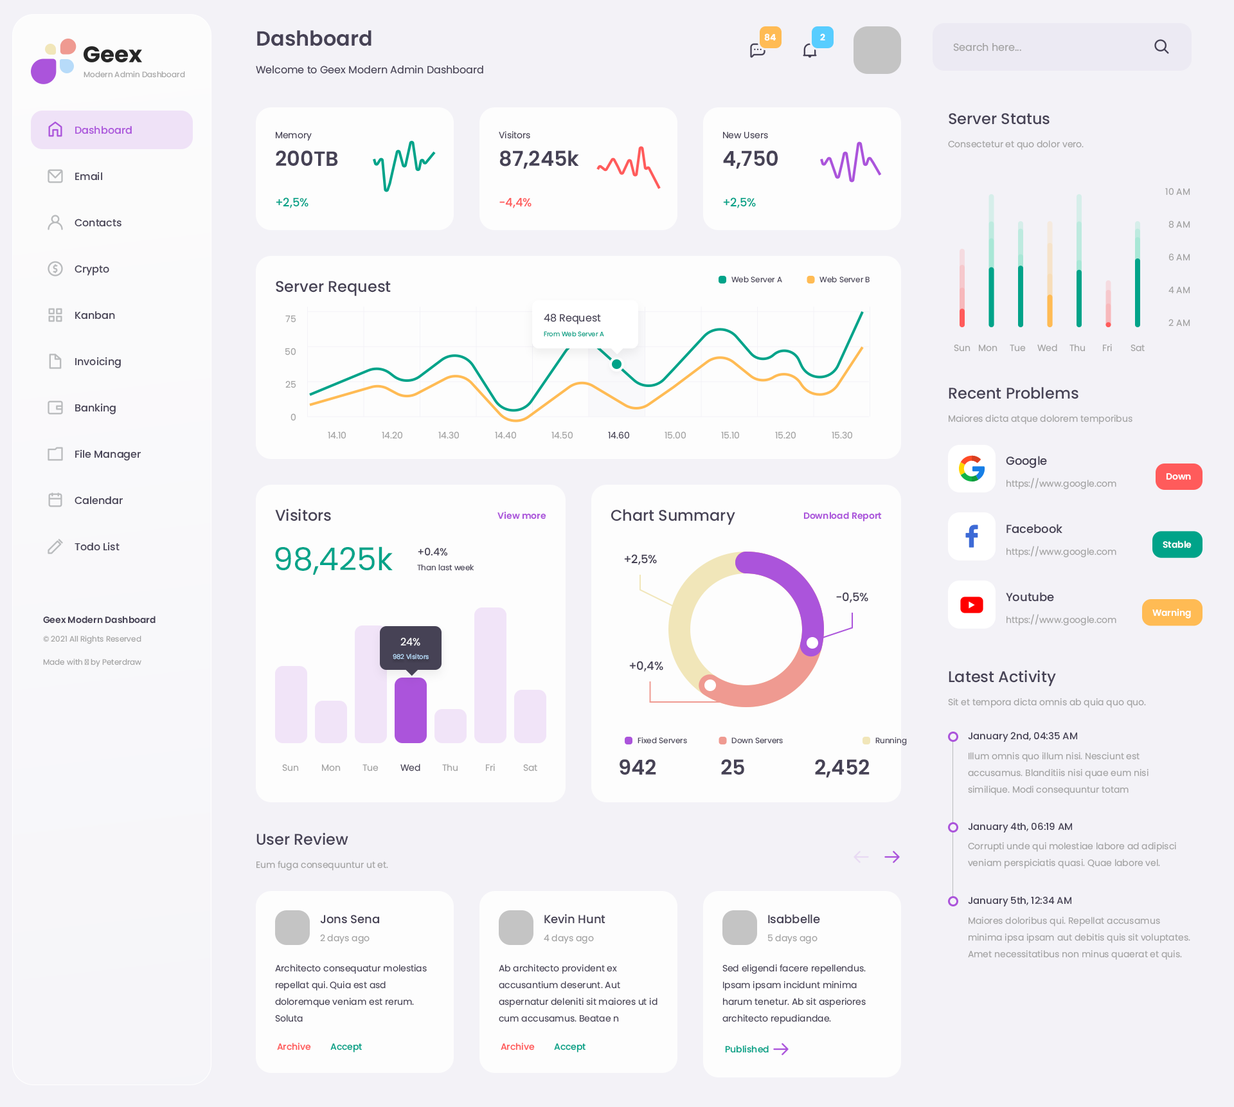
<style>
.page{position:relative;width:1234px;height:1107px;background:#f3f2f7}
.page>*{position:absolute;margin:0}
.t1{font:20.6px "Poppins-SemiBold";color:#464255}
.t2{font:9px "Poppins-Bold";color:#ffffff}
.t3{font:10.3px "Poppins-Regular";color:#a3a3a3}
.t4{font:10.3px "Poppins-Regular";color:#464255}
.t5{font:7.7px "Poppins-Regular";color:#a3a3a3}
.t6{font:15.4px "Poppins-Medium";color:#464255}
.t7{font:10.3px "Poppins-Medium";color:#ab54db}
.t8{font:9px "Poppins-Regular";color:#464255}
.t9{font:9px "Poppins-Regular";color:#a3a3a3}
.t10{font:10.3px "Poppins-Medium";color:#464255}
.t11{font:11.6px "Poppins-Medium";color:#00a389}
.t12{font:11.6px "Poppins-Medium";color:#ff5b5b}
.t13{font:7.7px "Poppins-Regular";color:#464255}
.t14{font:6.4px "Poppins-Regular";color:#00a389}
.t15{font:11.6px "Poppins-Medium";color:#464255}
.t16{font:9px "Poppins-SemiBold";color:#ffffff}
.t17{font:9px "Poppins-SemiBold";color:#ab54db}
.t18{font:31.5px "Poppins-Regular";color:#00a389}
.t19{font:9px "Poppins-SemiBold";color:#464255}
.t20{font:10.3px "Poppins-Regular";color:#ffffff}
.t21{font:6.4px "Poppins-Regular";color:#b7dbf9}
.t22{font:9.6px "Poppins-Medium";color:#464255}
.t23{font:9px/16.7px "Poppins-Regular";color:#a3a3a3}
.t24{font:9px/16.7px "Poppins-Regular";color:#464255}
.t25{font:9px "Poppins-Medium";color:#ff5b5b}
.t26{font:9px "Poppins-Medium";color:#00a389}
</style>
<div class="page">
<p class="t1" style="left:257px;top:30px;width:115px;height:16px">Dashboard</p>
<p class="t2" style="left:764px;top:33px;width:12px;height:8px">84</p>
<p class="t2" style="left:820px;top:33px;width:5px;height:7px">2</p>
<p class="t3" style="left:953px;top:43px;width:69px;height:8px">Search here...</p>
<p class="t4" style="left:256px;top:65px;width:227px;height:9px">Welcome to Geex Modern Admin Dashboard</p>
<p class="t5" style="left:84px;top:71px;width:101px;height:7px">Modern Admin Dashboard</p>
<p class="t6" style="left:949px;top:113px;width:101px;height:12px">Server Status</p>
<p class="t7" style="left:75px;top:126px;width:57px;height:8px">Dashboard</p>
<p class="t8" style="left:276px;top:132px;width:36px;height:9px">Memory</p>
<p class="t8" style="left:499px;top:131px;width:31px;height:8px">Visitors</p>
<p class="t8" style="left:723px;top:132px;width:45px;height:7px">New Users</p>
<p class="t9" style="left:948px;top:140px;width:136px;height:10px">Consectetur et quo dolor vero.</p>
<p class="t1" style="left:276px;top:150px;width:62px;height:16px">200TB</p>
<p class="t1" style="left:500px;top:150px;width:79px;height:19px">87,245k</p>
<p class="t1" style="left:723px;top:150px;width:55px;height:19px">4,750</p>
<p class="t10" style="left:75px;top:172px;width:27px;height:9px">Email</p>
<p class="t11" style="left:276px;top:197px;width:33px;height:11px">+2,5%</p>
<p class="t12" style="left:500px;top:197px;width:32px;height:11px">-4,4%</p>
<p class="t11" style="left:723px;top:197px;width:33px;height:11px">+2,5%</p>
<p class="t9" style="left:1166px;top:188px;width:25px;height:7px">10 AM</p>
<p class="t10" style="left:75px;top:219px;width:47px;height:8px">Contacts</p>
<p class="t9" style="left:1169px;top:221px;width:22px;height:7px">8 AM</p>
<p class="t9" style="left:1169px;top:253px;width:22px;height:8px">6 AM</p>
<p class="t10" style="left:75px;top:265px;width:34px;height:11px">Crypto</p>
<p class="t6" style="left:276px;top:281px;width:115px;height:15px">Server Request</p>
<p class="t13" style="left:732px;top:276px;width:50px;height:7px">Web Server A</p>
<p class="t13" style="left:820px;top:276px;width:50px;height:7px">Web Server B</p>
<p class="t9" style="left:1169px;top:286px;width:22px;height:8px">4 AM</p>
<p class="t10" style="left:75px;top:311px;width:40px;height:9px">Kanban</p>
<p class="t9" style="left:285px;top:315px;width:11px;height:8px">75</p>
<p class="t4" style="left:544px;top:314px;width:57px;height:11px">48 Request</p>
<p class="t9" style="left:1169px;top:319px;width:22px;height:8px">2 AM</p>
<p class="t14" style="left:544px;top:331px;width:60px;height:6px">From Web Server A</p>
<p class="t9" style="left:285px;top:348px;width:11px;height:8px">50</p>
<p class="t9" style="left:954px;top:345px;width:17px;height:7px">Sun</p>
<p class="t9" style="left:979px;top:345px;width:19px;height:7px">Mon</p>
<p class="t9" style="left:1010px;top:345px;width:16px;height:7px">Tue</p>
<p class="t9" style="left:1038px;top:344px;width:20px;height:8px">Wed</p>
<p class="t9" style="left:1070px;top:344px;width:15px;height:8px">Thu</p>
<p class="t9" style="left:1103px;top:344px;width:9px;height:8px">Fri</p>
<p class="t9" style="left:1131px;top:345px;width:14px;height:7px">Sat</p>
<p class="t10" style="left:75px;top:357px;width:46px;height:11px">Invoicing</p>
<p class="t9" style="left:285px;top:381px;width:11px;height:7px">25</p>
<p class="t6" style="left:949px;top:387px;width:130px;height:12px">Recent Problems</p>
<p class="t10" style="left:75px;top:403px;width:41px;height:12px">Banking</p>
<p class="t9" style="left:291px;top:413px;width:5px;height:8px">0</p>
<p class="t9" style="left:949px;top:415px;width:184px;height:9px">Maiores dicta atque dolorem temporibus</p>
<p class="t9" style="left:328px;top:431px;width:18px;height:8px">14.10</p>
<p class="t9" style="left:382px;top:431px;width:20px;height:8px">14.20</p>
<p class="t9" style="left:438px;top:431px;width:21px;height:8px">14.30</p>
<p class="t9" style="left:495px;top:431px;width:21px;height:8px">14.40</p>
<p class="t9" style="left:552px;top:431px;width:21px;height:8px">14.50</p>
<p class="t8" style="left:608px;top:431px;width:21px;height:8px">14.60</p>
<p class="t9" style="left:665px;top:431px;width:21px;height:8px">15.00</p>
<p class="t9" style="left:721px;top:431px;width:18px;height:8px">15.10</p>
<p class="t9" style="left:775px;top:431px;width:21px;height:8px">15.20</p>
<p class="t9" style="left:832px;top:431px;width:20px;height:8px">15.30</p>
<p class="t10" style="left:75px;top:449px;width:66px;height:12px">File Manager</p>
<p class="t15" style="left:1006px;top:456px;width:41px;height:12px">Google</p>
<p class="t16" style="left:1166px;top:473px;width:25px;height:7px">Down</p>
<p class="t9" style="left:1007px;top:478px;width:110px;height:11px">https://www.google.com</p>
<p class="t10" style="left:75px;top:496px;width:48px;height:9px">Calendar</p>
<p class="t6" style="left:275px;top:509px;width:56px;height:12px">Visitors</p>
<p class="t6" style="left:611px;top:509px;width:124px;height:16px">Chart Summary</p>
<p class="t17" style="left:498px;top:512px;width:48px;height:7px">View more</p>
<p class="t17" style="left:804px;top:512px;width:78px;height:9px">Download Report</p>
<p class="t15" style="left:1007px;top:524px;width:56px;height:10px">Facebook</p>
<p class="t10" style="left:75px;top:542px;width:45px;height:9px">Todo List</p>
<p class="t9" style="left:1007px;top:546px;width:110px;height:11px">https://www.google.com</p>
<p class="t16" style="left:1163px;top:541px;width:29px;height:7px">Stable</p>
<p class="t18" style="left:275px;top:546px;width:118px;height:29px">98,425k</p>
<p class="t10" style="left:418px;top:548px;width:29px;height:8px">+0.4%</p>
<p class="t15" style="left:624px;top:554px;width:33px;height:11px">+2,5%</p>
<p class="t13" style="left:417px;top:564px;width:57px;height:7px">Than last week</p>
<p class="t15" style="left:836px;top:592px;width:33px;height:11px">-0,5%</p>
<p class="t15" style="left:1006px;top:592px;width:48px;height:10px">Youtube</p>
<p class="t19" style="left:43px;top:616px;width:113px;height:8px">Geex Modern Dashboard</p>
<p class="t9" style="left:1007px;top:614px;width:110px;height:12px">https://www.google.com</p>
<p class="t16" style="left:1153px;top:609px;width:38px;height:9px">Warning</p>
<p class="t5" style="left:43px;top:635px;width:98px;height:9px">© 2021 All Rights Reserved</p>
<p class="t20" style="left:401px;top:638px;width:19px;height:8px">24%</p>
<p class="t21" style="left:393px;top:654px;width:36px;height:6px">982 Visitors</p>
<p class="t5" style="left:43px;top:658px;width:98px;height:9px">Made with ♥ by Peterdraw</p>
<p class="t15" style="left:629px;top:661px;width:34px;height:11px">+0,4%</p>
<p class="t6" style="left:949px;top:670px;width:107px;height:17px">Latest Activity</p>
<p class="t9" style="left:948px;top:698px;width:198px;height:10px">Sit et tempora dicta omnis ab quia quo quo.</p>
<p class="t13" style="left:638px;top:737px;width:49px;height:7px">Fixed Servers</p>
<p class="t13" style="left:732px;top:737px;width:51px;height:7px">Down Servers</p>
<p class="t13" style="left:876px;top:737px;width:31px;height:9px">Running</p>
<p class="t22" style="left:968px;top:732px;width:109px;height:10px">January 2nd, 04:35 AM</p>
<p class="t1" style="left:620px;top:759px;width:36px;height:16px">942</p>
<p class="t1" style="left:721px;top:759px;width:23px;height:16px">25</p>
<p class="t1" style="left:815px;top:759px;width:55px;height:19px">2,452</p>
<p class="t23" style="left:968px;top:752px;width:181px;height:43px">Illum omnis quo illum nisi. Nesciunt est accusamus. Blanditiis nisi quae eum nisi similique. Modi consequuntur totam</p>
<p class="t9" style="left:282px;top:764px;width:17px;height:7px">Sun</p>
<p class="t9" style="left:322px;top:764px;width:19px;height:7px">Mon</p>
<p class="t9" style="left:363px;top:764px;width:16px;height:7px">Tue</p>
<p class="t8" style="left:401px;top:764px;width:19px;height:7px">Wed</p>
<p class="t9" style="left:442px;top:764px;width:16px;height:7px">Thu</p>
<p class="t9" style="left:486px;top:764px;width:9px;height:7px">Fri</p>
<p class="t9" style="left:523px;top:764px;width:14px;height:7px">Sat</p>
<p class="t6" style="left:256px;top:833px;width:92px;height:12px">User Review</p>
<p class="t22" style="left:968px;top:822px;width:104px;height:11px">January 4th, 06:19 AM</p>
<p class="t23" style="left:968px;top:842px;width:208px;height:27px">Corrupti unde qui molestiae labore ad adipisci veniam perspiciatis quasi. Quae labore vel.</p>
<p class="t9" style="left:256px;top:861px;width:132px;height:9px">Eum fuga consequuntur ut et.</p>
<p class="t22" style="left:968px;top:896px;width:104px;height:10px">January 5th, 12:34 AM</p>
<p class="t15" style="left:320px;top:915px;width:59px;height:9px">Jons Sena</p>
<p class="t15" style="left:544px;top:914px;width:62px;height:10px">Kevin Hunt</p>
<p class="t15" style="left:768px;top:914px;width:52px;height:10px">Isabbelle</p>
<p class="t23" style="left:968px;top:917px;width:223px;height:43px">Maiores doloribus qui. Repellat accusamus minima ipsa ipsam aut debitis quis sit voluptates. Amet necessitatibus non minus quaerat et quis.</p>
<p class="t9" style="left:320px;top:934px;width:50px;height:10px">2 days ago</p>
<p class="t9" style="left:544px;top:934px;width:50px;height:10px">4 days ago</p>
<p class="t9" style="left:768px;top:934px;width:50px;height:10px">5 days ago</p>
<p class="t24" style="left:275px;top:964px;width:152px;height:58px">Architecto consequatur molestias repellat qui. Quia est asd doloremque veniam est rerum. Soluta</p>
<p class="t24" style="left:499px;top:964px;width:159px;height:58px">Ab architecto provident ex accusantium deserunt. Aut aspernatur deleniti sit maiores ut id cum accusamus. Beatae n</p>
<p class="t24" style="left:723px;top:964px;width:143px;height:60px">Sed eligendi facere repellendus. Ipsam ipsam incidunt minima harum tenetur. Ab sit asperiores architecto repudiandae.</p>
<p class="t25" style="left:277px;top:1043px;width:34px;height:7px">Archive</p>
<p class="t26" style="left:330px;top:1043px;width:32px;height:9px">Accept</p>
<p class="t25" style="left:501px;top:1043px;width:34px;height:7px">Archive</p>
<p class="t26" style="left:554px;top:1043px;width:32px;height:9px">Accept</p>
<p class="t26" style="left:725px;top:1045px;width:44px;height:8px">Published</p>
</div>
